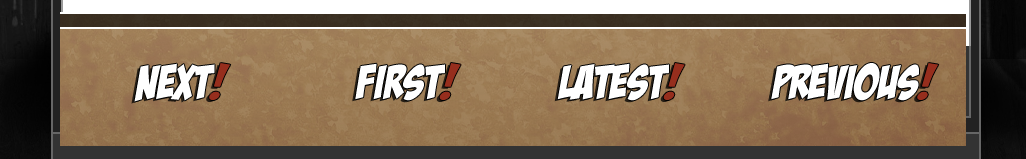
<style>
.page{position:relative;width:1026px;height:159px}
.page>*{position:absolute;margin:0}
.t1{font:47.4px "BadaBoomBB";color:#ffffff}
.t2{font:47.4px "BadaBoomBB";color:#962e1d}
</style>
<div class="page">
<p class="t1" style="left:134px;top:63px;width:97px;height:39px">next<span class="t2">!</span></p>
<p class="t1" style="left:355px;top:63px;width:106px;height:38px">First<span class="t2">!</span></p>
<p class="t1" style="left:557px;top:63px;width:128px;height:38px">latest<span class="t2">!</span></p>
<p class="t1" style="left:771px;top:63px;width:168px;height:38px">previous<span class="t2">!</span></p>
</div>
